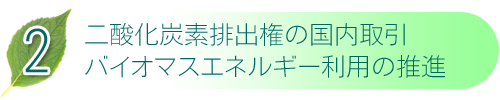
<style>
.page{position:relative;width:500px;height:100px;background:#ffffff}
.page>*{position:absolute;margin:0}
.t1{font:58.3px "NfMotoyaCedar-W1-90mskp-RKSJ-H";color:#006666}
.t2{font:25px "NfMotoyaCedar-W1-90mskp-RKSJ-H";color:#006666}
</style>
<div class="page">
<p class="t1" style="left:25px;top:28px;width:23px;height:45px">2</p>
<p class="t2" style="left:85px;top:23px;width:320px;height:23px">二酸化炭素排出権の国内取引</p>
<p class="t2" style="left:85px;top:55px;width:360px;height:23px">バイオマスエネルギー利用の推進</p>
</div>
